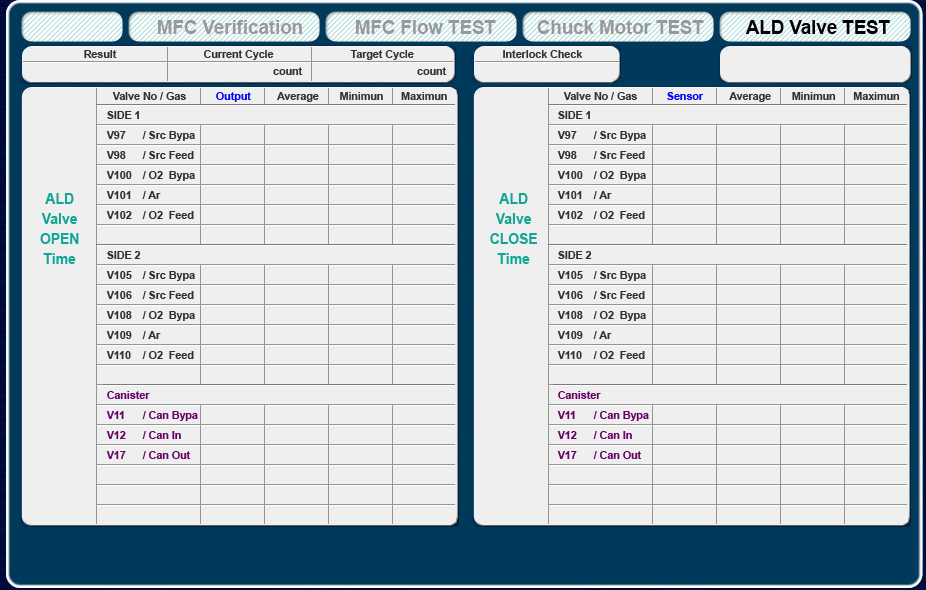
<style>
.page{position:relative;width:926px;height:590px;background:#efefef}
.page>*{position:absolute;margin:0}
.t1{font:18.7px "Arial-BoldMT";color:#999999}
.t2{font:18.7px "Arial-BoldMT";color:#000000}
.t3{font:10.7px "Arial-BoldMT";color:#313131}
.t4{font:10.7px "Arial-BoldMT";color:#0000ff}
.t5{font:10.7px/20px "Arial-BoldMT";color:#313131}
.t6{font:10.7px/20px "Arial-BoldMT";color:#660066}
.t7{font:14.7px/20px "Arial-BoldMT";color:#10a594;scale:0.95 1}
</style>
<div class="page">
<p class="t1" style="left:158px;top:20px;width:144px;height:14px">MFC Verification</p>
<p class="t1" style="left:356px;top:20px;width:140px;height:14px">MFC Flow TEST</p>
<p class="t1" style="left:537px;top:20px;width:167px;height:14px">Chuck Motor TEST</p>
<p class="t2" style="left:745px;top:20px;width:145px;height:14px">ALD Valve TEST</p>
<p class="t3" style="left:84px;top:50px;width:499px;height:10px">Result       Current Cycle                        Target Cycle                              Interlock Check</p>
<p class="t3" style="left:112px;top:92px;width:335px;height:10px">Valve No / Gas          <span class="t4">Output</span>         Average       Minimun      Maximun</p>
<p class="t3" style="left:563px;top:92px;width:337px;height:10px">Valve No / Gas          <span class="t4">Sensor</span>         Average       Minimun      Maximun</p>
<p class="t5" style="left:106px;top:111px;width:92px;height:348px">SIDE 1<br>V97 / Src Bypa<br>V98 / Src Feed<br>V100 / O2  Bypa<br>V101 / Ar<br>V102 / O2  Feed<br><br>SIDE 2<br>V105 / Src Bypa<br>V106 / Src Feed<br>V108 / O2  Bypa<br>V109 / Ar<br>V110 / O2  Feed<br><br><span class="t6">Canister<br>V11 / Can Bypa<br>V12 / Can In<br>V17 / Can Out</span></p>
<p class="t5" style="left:557px;top:111px;width:92px;height:348px">SIDE 1<br>V97 / Src Bypa<br>V98 / Src Feed<br>V100 / O2  Bypa<br>V101 / Ar<br>V102 / O2  Feed<br><br>SIDE 2<br>V105 / Src Bypa<br>V106 / Src Feed<br>V108 / O2  Bypa<br>V109 / Ar<br>V110 / O2  Feed<br><br><span class="t6">Canister<br>V11 / Can Bypa<br>V12 / Can In<br>V17 / Can Out</span></p>
<p class="t7" style="left:40px;top:193px;width:39px;height:71px;text-align:center">ALD<br>Valve<br>OPEN<br>Time</p>
<p class="t7" style="left:490px;top:193px;width:47px;height:71px;text-align:center">ALD<br>Valve<br>CLOSE<br>Time</p>
</div>
